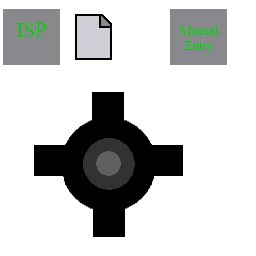
<style>
.page{position:relative;width:256px;height:256px;background:#ffffff}
.page>*{position:absolute;margin:0}
.t1{font:20.8px "TimesNewRomanPSMT";color:#06cc10}
.t2{font:12.5px "TimesNewRomanPSMT";color:#06cc10}
</style>
<div class="page">
<p class="t1" style="left:16px;top:23px;width:31px;height:14px">ISP</p>
<p class="t2" style="left:180px;top:26px;width:38px;height:27px;text-align:center">Manual Entry</p>
</div>
